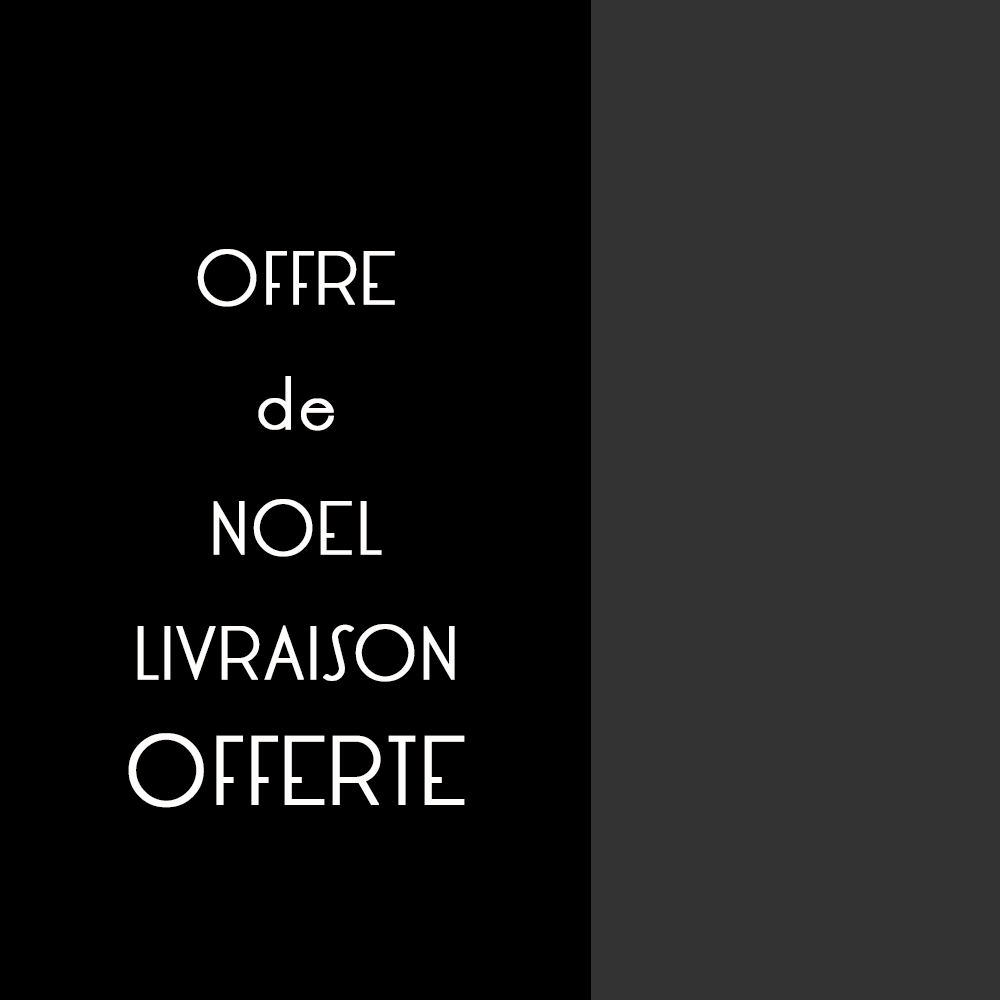
<style>
.page{position:relative;width:1000px;height:1000px;background:#000000}
.page>*{position:absolute;margin:0}
.t1{font:58.3px/125px "LRTOksana";letter-spacing:0.05em;color:#fffcfc;font-weight:bold}
.t2{font:75px/125px "LRTOksana";letter-spacing:0.05em;color:#fffcfc;font-weight:bold}
</style>
<div class="page">
<p class="t1" style="left:128px;top:249px;width:337px;height:559px;text-align:justify">OFFRE<br>de<br>NOEL<br>LIVRAISON<br><span class="t2">OFFERTE</span></p>
</div>
